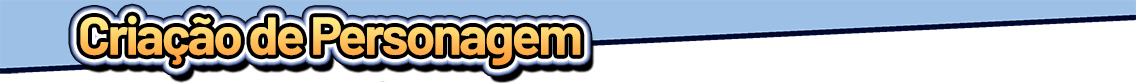
<style>
.page{position:relative;width:1136px;height:83px;background:#ffffff}
.page>*{position:absolute;margin:0}
.t1{font:53.3px "Barlow-Bold";letter-spacing:-0.05em}
</style>
<div class="page">
<p class="t1" style="left:80px;top:15px;width:501px;height:51px">Criação de Personagem</p>
</div>
